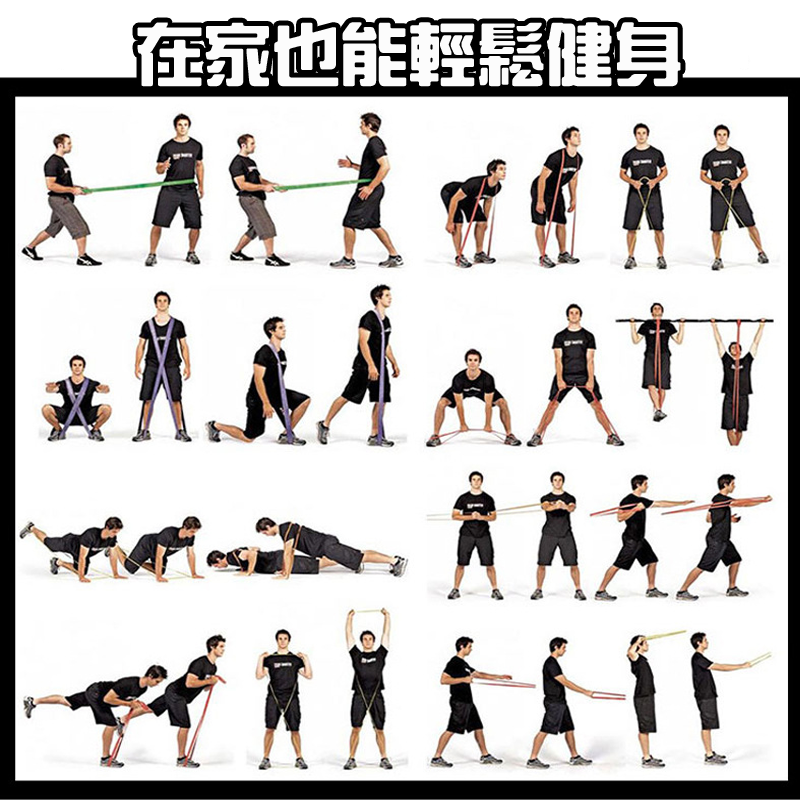
<style>
.page{position:relative;width:800px;height:800px;background:#ffffff}
.page>*{position:absolute;margin:0}
.t1{font:66.7px "HanWangZonYi";color:#fcfcfc;font-weight:bold}
</style>
<div class="page">
<p class="t1" style="left:137px;top:22px;width:544px;height:65px">在家也能輕鬆健身</p>
</div>
